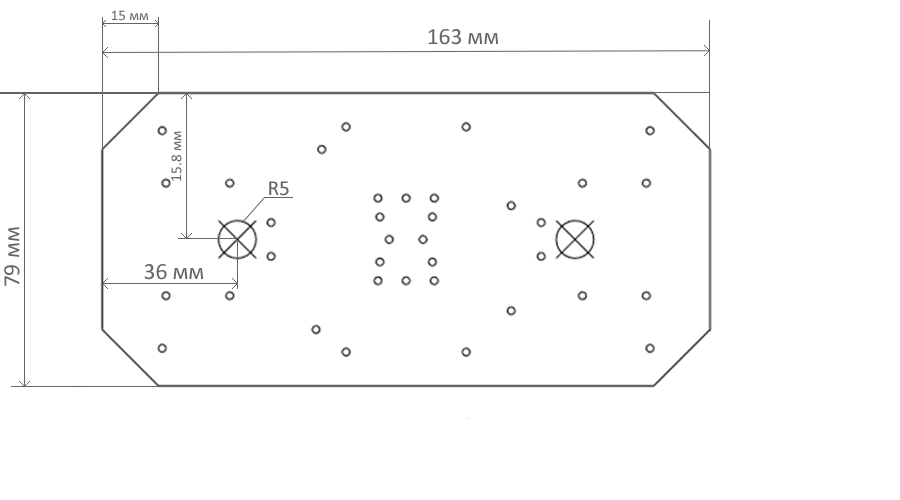
<style>
.page{position:relative;width:900px;height:500px;background:#ffffff}
.page>*{position:absolute;margin:0}
.t1{font:14.7px "Calibri";color:#656565}
.t2{font:23.5px "Calibri";color:#656565}
.t3{font:15.3px "Calibri";color:#656565}
</style>
<div class="page">
<p class="t1" style="left:112px;top:10px;width:36px;height:11px">15 мм</p>
<p class="t2" style="left:428px;top:29px;width:70px;height:16px">163 мм</p>
<p class="t3" style="left:171px;top:131px;width:11px;height:50px;rotate:-90deg">15.8 мм</p>
<p class="t2" style="left:4px;top:227px;width:16px;height:59px;rotate:-90deg">79 мм</p>
<p class="t2" style="left:144px;top:264px;width:59px;height:16px">36 мм</p>
</div>
